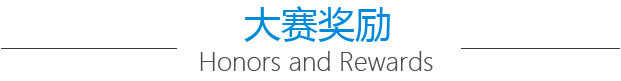
<style>
.page{position:relative;width:621px;height:81px;background:#ffffff}
.page>*{position:absolute;margin:0}
.t1{font:37px "MicrosoftYaHei";color:#008ad9}
.t2{font:25px "MicrosoftYaHeiLight";color:#4d4d4d}
</style>
<div class="page">
<p class="t1" style="left:244px;top:6px;width:146px;height:36px">大赛奖励</p>
<p class="t2" style="left:200px;top:51px;width:233px;height:20px">Honors and Rewards</p>
</div>
